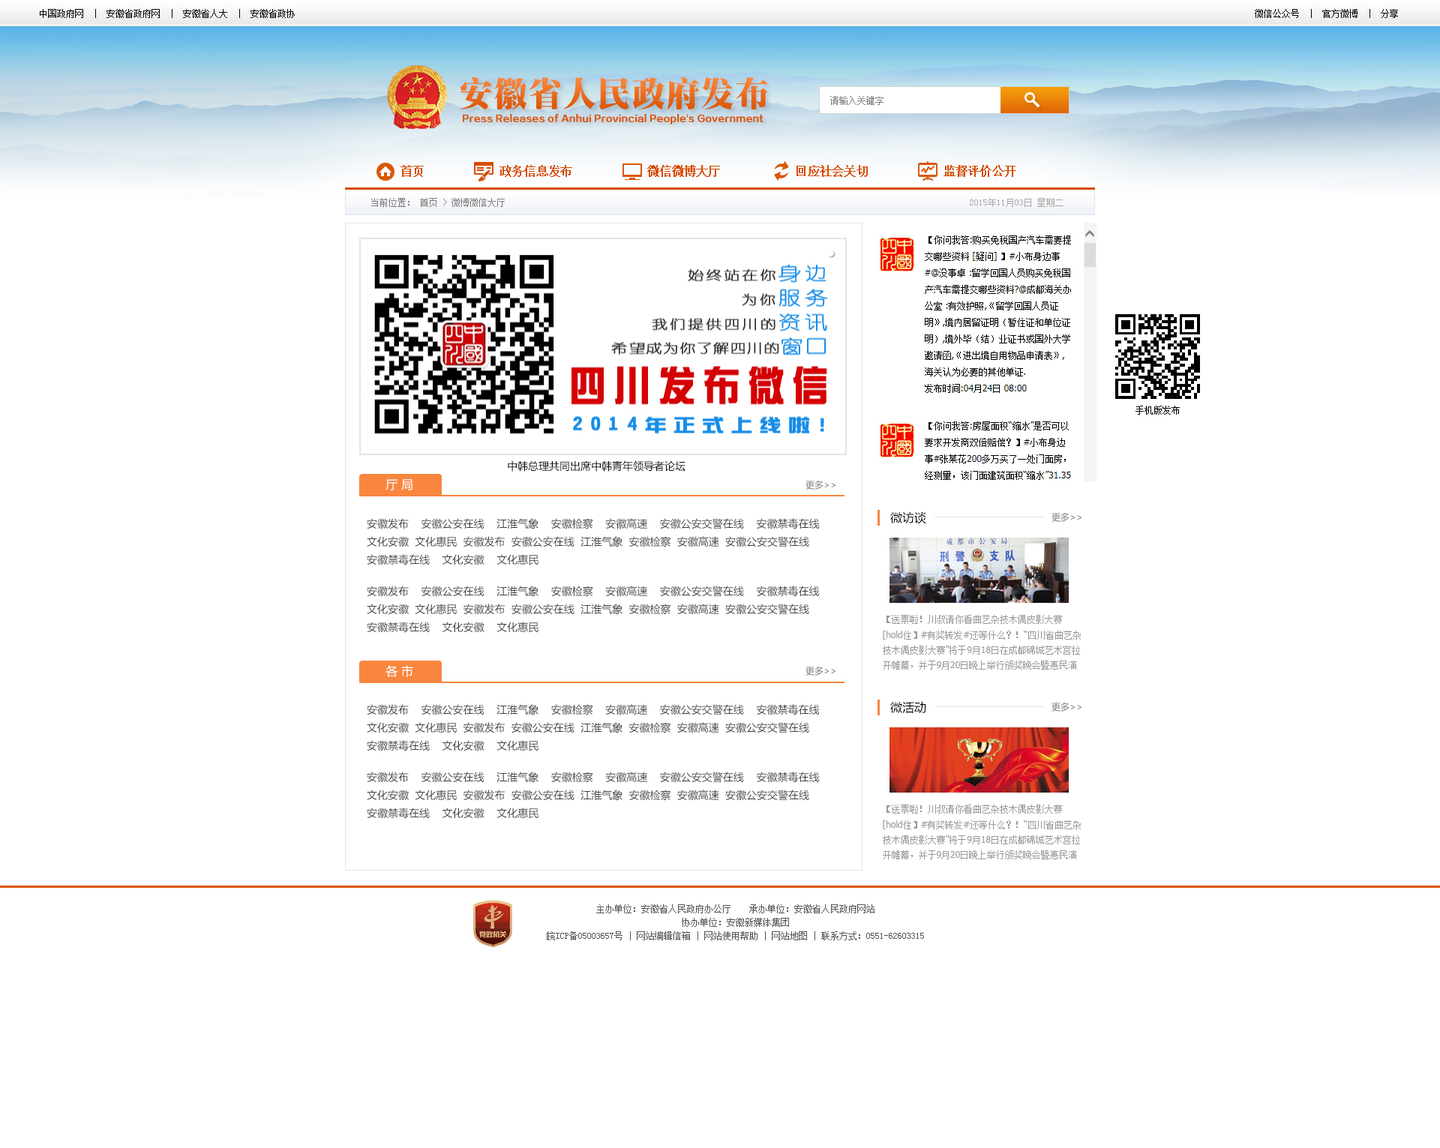
<style>
.page{position:relative;width:1440px;height:1148px;background:#ffffff}
.page>*{position:absolute;margin:0}
.t1{font:9px "SimSun";color:#000000}
.t2{font:33.7px "SungtiEG-Ultra-GB";letter-spacing:0.025em}
.t3{font:9px "SimSun";color:#7d7d7d}
.t4{font:9px "FZZDHJW--GB1-0";color:#da5705}
.t5{font:12px "SimSun";color:#d64c04;font-weight:bold}
.t6{font:9px "SimSun";color:#aaaaaa}
.t7{font:10.5px "MicrosoftYaHei";color:#000000}
.t8{font:12px "MicrosoftYaHei";color:#ffffff}
.t9{font:9px "MicrosoftYaHei";color:#707070}
.t10{font:10.5px/18px "MicrosoftYaHei";color:#434343}
.t11{font:12px "MicrosoftYaHei";color:#000000}
.t12{font:9px/13.5px "SimSun";color:#535353}
</style>
<div class="page">
<p class="t1" style="left:40px;top:9px;width:255px;height:9px">中国政府网  |  安徽省政府网  |  安徽省人大  |  安徽省政协</p>
<p class="t1" style="left:1255px;top:9px;width:143px;height:9px">微信公众号  |  官方微博  |  分享</p>
<p class="t2" style="left:460px;top:77px;width:308px;height:33px">安徽省人民政府发布</p>
<p class="t3" style="left:830px;top:96px;width:54px;height:9px">请输入关键字</p>
<p class="t4" style="left:463px;top:114px;width:301px;height:10px">Press Releases of Anhui Provincial People's Government</p>
<p class="t5" style="left:400px;top:165px;width:616px;height:12px">首页            政务信息发布            微信微博大厅            回应社会关切            监督评价公开</p>
<p class="t3" style="left:371px;top:198px;width:134px;height:9px">当前位置： 首页 &gt; 微博微信大厅</p>
<p class="t6" style="left:970px;top:198px;width:94px;height:9px">2015年11月03日 星期二</p>
<p class="t1" style="left:1136px;top:406px;width:44px;height:9px">手机版发布</p>
<p class="t7" style="left:508px;top:460px;width:178px;height:12px">中韩总理共同出席中韩青年领导者论坛</p>
<p class="t8" style="left:386px;top:479px;width:26px;height:11px">厅 局</p>
<p class="t9" style="left:806px;top:481px;width:30px;height:9px">更多&gt;&gt;</p>
<p class="t10" style="left:367px;top:518px;width:453px;height:48px">安徽发布    安徽公安在线    江淮气象    安徽检察    安徽高速    安徽公安交警在线    安徽禁毒在线<br>文化安徽  文化惠民  安徽发布  安徽公安在线  江淮气象  安徽检察  安徽高速  安徽公安交警在线  <br>安徽禁毒在线    文化安徽    文化惠民</p>
<p class="t11" style="left:890px;top:512px;width:36px;height:12px">微访谈</p>
<p class="t9" style="left:1052px;top:513px;width:30px;height:9px">更多&gt;&gt;</p>
<p class="t10" style="left:367px;top:586px;width:453px;height:47px">安徽发布    安徽公安在线    江淮气象    安徽检察    安徽高速    安徽公安交警在线    安徽禁毒在线<br>文化安徽  文化惠民  安徽发布  安徽公安在线  江淮气象  安徽检察  安徽高速  安徽公安交警在线  <br>安徽禁毒在线    文化安徽    文化惠民</p>
<p class="t8" style="left:386px;top:665px;width:27px;height:12px">各 市</p>
<p class="t9" style="left:806px;top:667px;width:30px;height:9px">更多&gt;&gt;</p>
<p class="t11" style="left:890px;top:701px;width:36px;height:13px">微活动</p>
<p class="t10" style="left:367px;top:704px;width:453px;height:48px">安徽发布    安徽公安在线    江淮气象    安徽检察    安徽高速    安徽公安交警在线    安徽禁毒在线<br>文化安徽  文化惠民  安徽发布  安徽公安在线  江淮气象  安徽检察  安徽高速  安徽公安交警在线  <br>安徽禁毒在线    文化安徽    文化惠民</p>
<p class="t9" style="left:1052px;top:703px;width:30px;height:9px">更多&gt;&gt;</p>
<p class="t10" style="left:367px;top:772px;width:453px;height:47px">安徽发布    安徽公安在线    江淮气象    安徽检察    安徽高速    安徽公安交警在线    安徽禁毒在线<br>文化安徽  文化惠民  安徽发布  安徽公安在线  江淮气象  安徽检察  安徽高速  安徽公安交警在线  <br>安徽禁毒在线    文化安徽    文化惠民</p>
<p class="t12" style="left:547px;top:904px;width:377px;height:36px;text-align:center">主办单位：安徽省人民政府办公厅    承办单位：安徽省人民政府网站<br>协办单位：安徽新媒体集团<br>皖ICP备05003657号 | 网站编辑信箱 | 网站使用帮助 | 网站地图 | 联系方式：0551-62603315</p>
</div>
